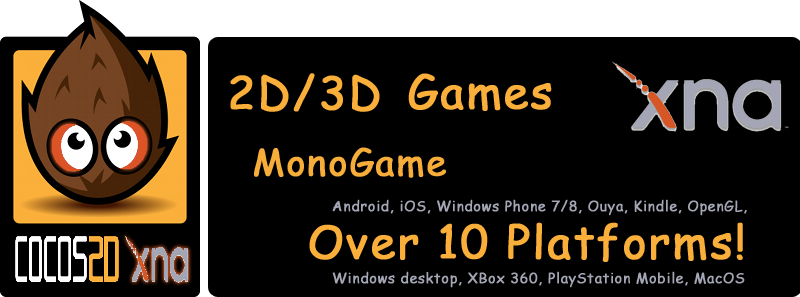
<style>
.page{position:relative;width:800px;height:297px;background:#000000}
.page>*{position:absolute;margin:0}
.t1{font:45px "ComicSansMS";letter-spacing:0.03em;color:#fbaf3b;font-weight:bold}
.t2{font:36px "ComicSansMS";letter-spacing:0.03em;color:#f7ad3a;font-weight:bold}
.t3{font:14px/72px "ComicSansMS";letter-spacing:0.03em;color:#a4a6b5;font-weight:bold}
</style>
<div class="page">
<p class="t1" style="left:230px;top:73px;width:150px;height:39px">2D/3D</p>
<p class="t1" style="left:408px;top:73px;width:144px;height:38px">Games</p>
<p class="t2" style="left:254px;top:147px;width:192px;height:31px">MonoGame</p>
<p class="t3" style="left:332px;top:199px;width:415px;height:89px">Android, iOS, Windows Phone 7/8, Ouya, Kindle, OpenGL, <br>Windows desktop, XBox 360, PlayStation Mobile, MacOS</p>
<p class="t1" style="left:309px;top:222px;width:434px;height:40px">Over 10 Platforms!</p>
</div>
